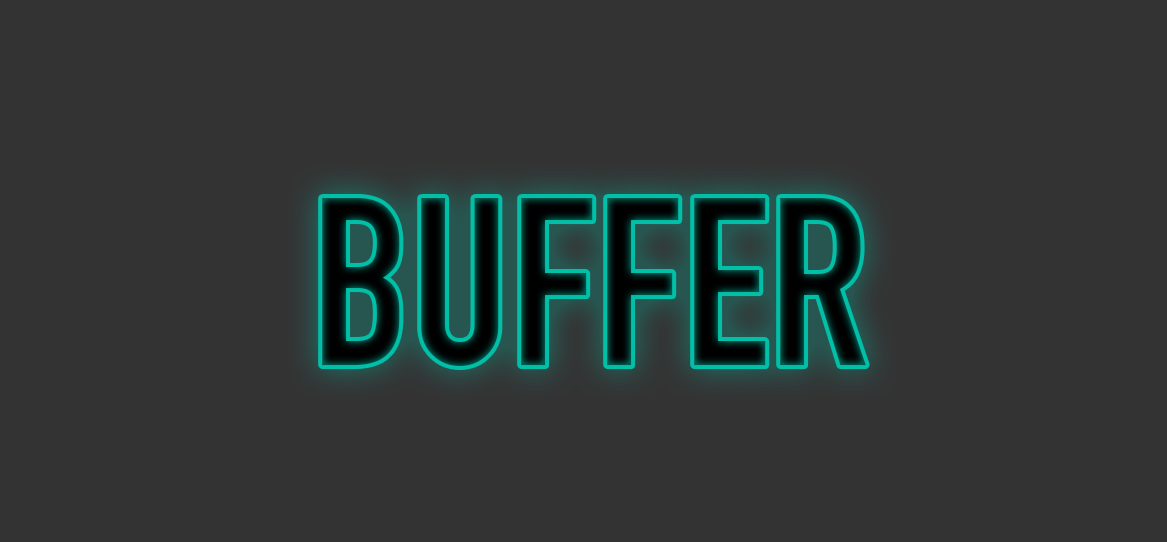
<style>
.page{position:relative;width:1167px;height:542px;background:#333333}
.page>*{position:absolute;margin:0}
.t1{font:233.7px "DINEngschrift";text-transform:uppercase}
</style>
<div class="page">
<p class="t1" style="left:322px;top:198px;width:544px;height:168px">bufFer</p>
</div>
